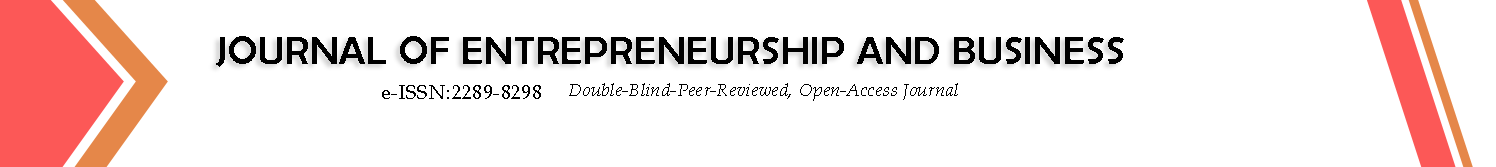
<style>
.page{position:relative;width:1496px;height:167px;background:#ffffff}
.page>*{position:absolute;margin:0}
.t1{font:40px "BerlinSansFB-Reg";letter-spacing:0.02em;color:#000000}
.t2{font:20px "BookAntiqua";letter-spacing:0.02em;color:#000000}
.t3{font:18px "BookAntiqua-Italic";letter-spacing:0.02em;color:#000000}
</style>
<div class="page">
<p class="t1" style="left:216px;top:36px;width:908px;height:31px">JOURNAL OF ENTREPRENEURSHIP AND BUSINESS</p>
<p class="t2" style="left:382px;top:85px;width:159px;height:14px">e-ISSN:2289-8298</p>
<p class="t3" style="left:569px;top:83px;width:389px;height:18px">Double-Blind-Peer-Reviewed, Open-Access Journal</p>
</div>
